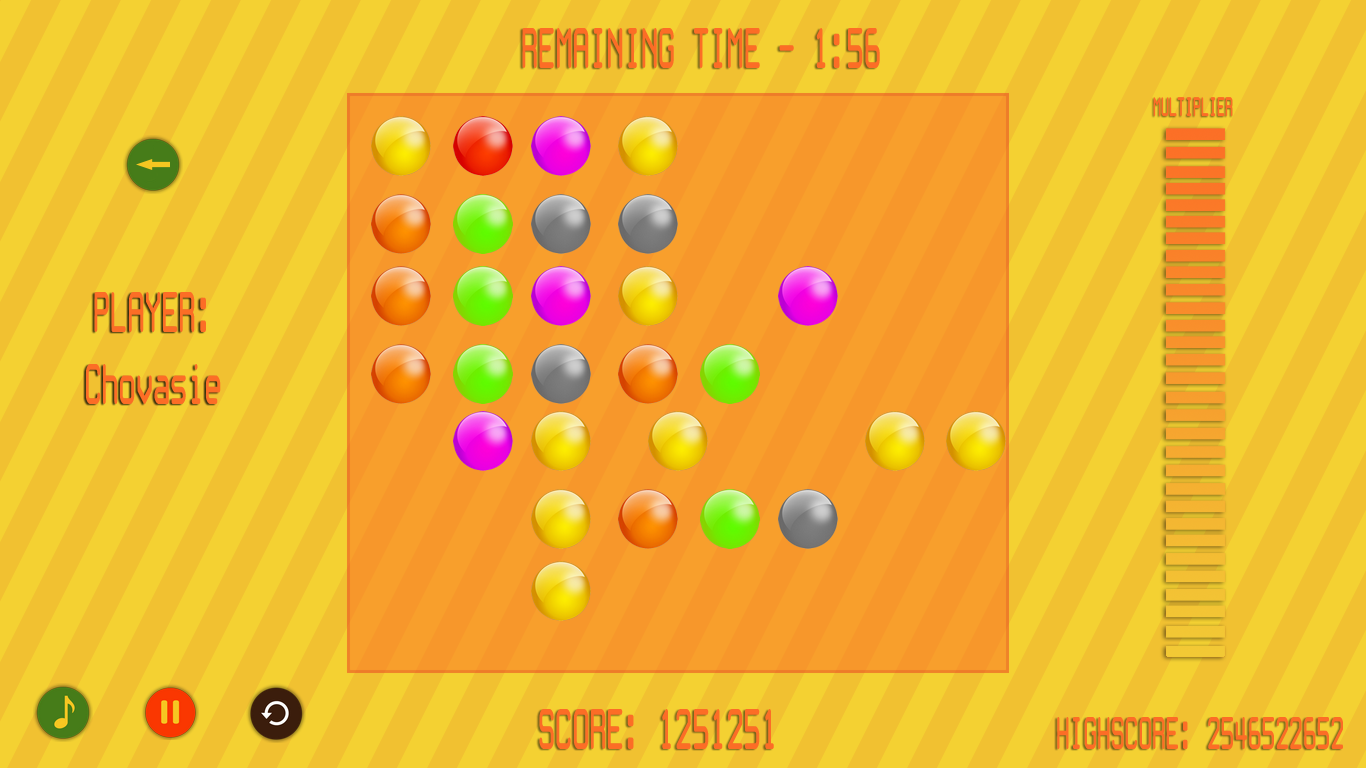
<style>
.page{position:relative;width:1366px;height:768px;background:#f1c131}
.page>*{position:absolute;margin:0}
.t1{font:60px "WhiteRabbit";color:#fc6d26;scale:0.5 1}
.t2{font:28px "WhiteRabbit";color:#fc6d26;scale:0.5 1}
.t3{font:48px "WhiteRabbit";color:#fc6d26;scale:0.5 1}
</style>
<div class="page">
<p class="t1" style="left:522px;top:28px;width:358px;height:40px">REMAINING TIME - 1:56</p>
<p class="t2" style="left:1153px;top:97px;width:80px;height:20px">MULTIPLIER</p>
<p class="t1" style="left:86px;top:292px;width:135px;height:112px;text-align:center">PLAYER: <br><br>Chovasie</p>
<p class="t1" style="left:539px;top:709px;width:235px;height:40px">SCORE: 1251251</p>
<p class="t3" style="left:1057px;top:717px;width:286px;height:32px">HIGHSCORE: 2546522652</p>
</div>
